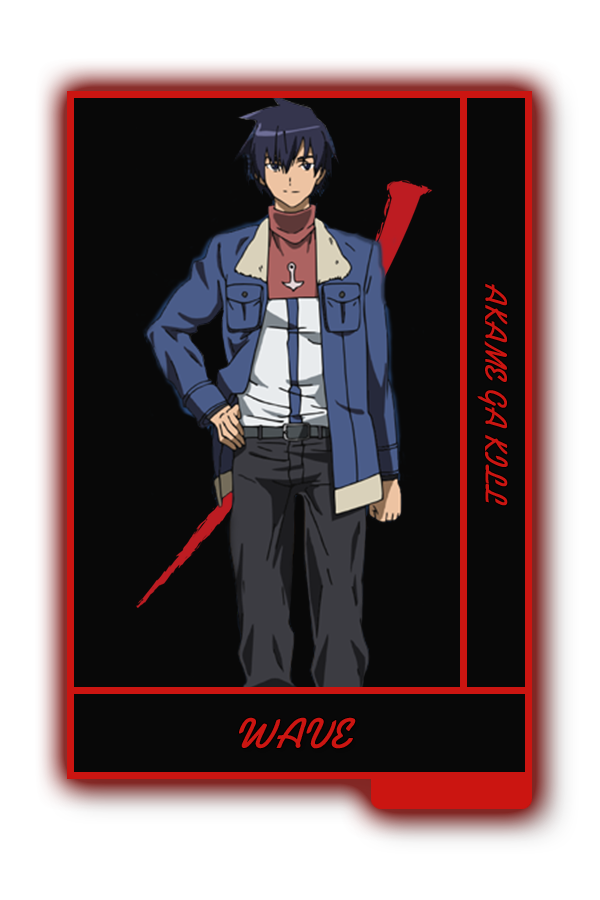
<style>
.page{position:relative;width:600px;height:900px;background:#080808}
.page>*{position:absolute;margin:0}
.t1{font:31.2px "Alako-Bold";color:#cb1511}
.t2{font:43.2px "Alako-Bold";color:#cb1511}
</style>
<div class="page">
<p class="t1" style="left:477px;top:283px;width:31px;height:223px;rotate:90deg">AKAME GA KILL</p>
<p class="t2" style="left:239px;top:717px;width:117px;height:32px">WAVE</p>
</div>
